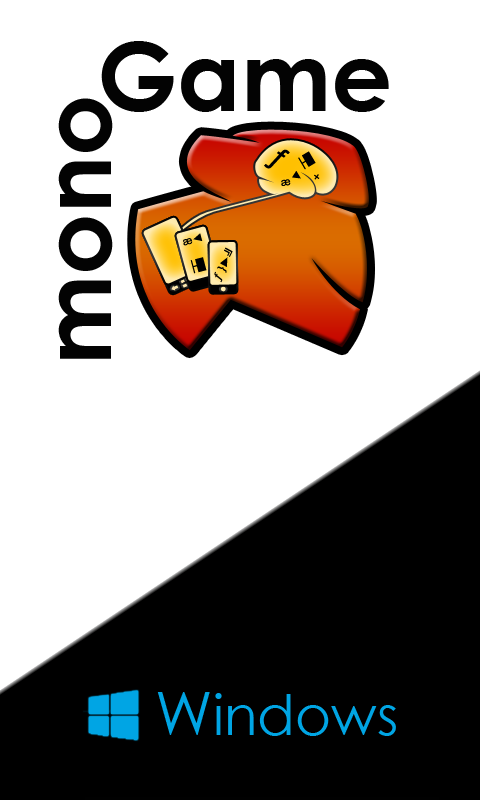
<style>
.page{position:relative;width:480px;height:800px;background:#ffffff}
.page>*{position:absolute;margin:0}
.t1{font:96px "CenturyGothic-Bold";color:#030303}
.t2{font:55px "CenturyGothic";color:#00a5e4}
.t3{font:60px "CenturyGothic";color:#00a5e4}
</style>
<div class="page">
<p class="t1" style="left:101px;top:41px;width:288px;height:71px">Game</p>
<p class="t1" style="left:58px;top:98px;width:55px;height:261px;rotate:-90deg">mono</p>
<p class="t2" style="left:157px;top:692px;width:239px;height:44px"><span class="t3">W</span>indows</p>
</div>
